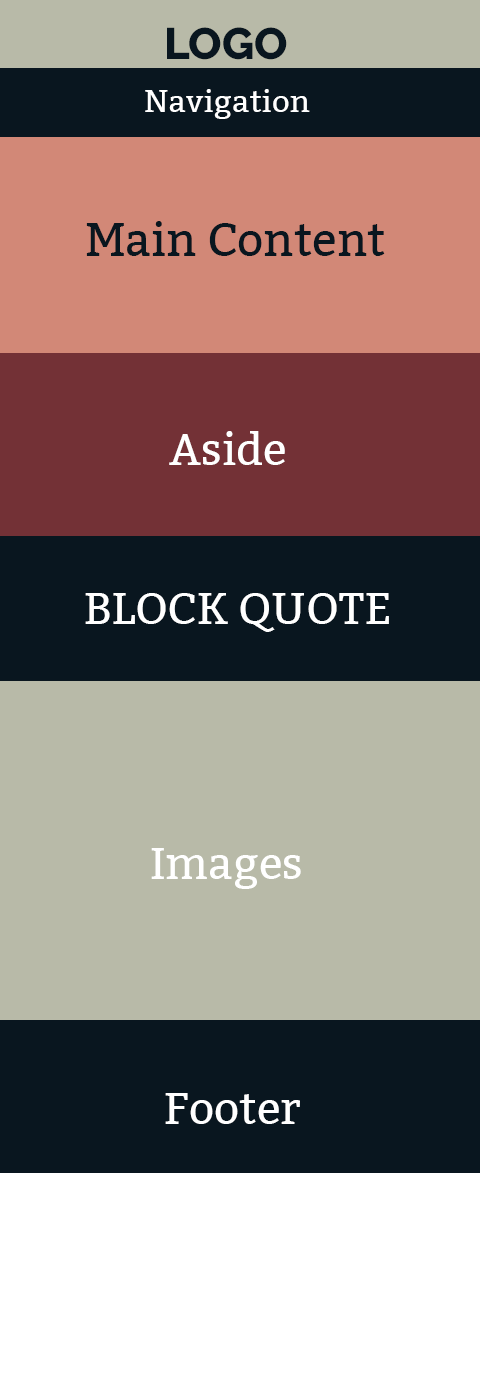
<style>
.page{position:relative;width:480px;height:1400px;background:#b8baa8}
.page>*{position:absolute;margin:0}
.t1{font:44px "Raleway-ExtraBold";color:#09161f}
.t2{font:31px "Bitter-Regular";color:#ffffff}
.t3{font:46px "Bitter-Regular";color:#09161f}
.t4{font:44px "Bitter-Regular";color:#ffffff}
</style>
<div class="page">
<p class="t1" style="left:167px;top:27px;width:120px;height:33px">LOGO</p>
<p class="t2" style="left:145px;top:89px;width:165px;height:30px">Navigation</p>
<p class="t3" style="left:86px;top:221px;width:299px;height:35px">Main Content</p>
<p class="t4" style="left:169px;top:431px;width:116px;height:34px">Aside</p>
<p class="t4" style="left:85px;top:593px;width:304px;height:39px">BLOCK QUOTE</p>
<p class="t4" style="left:151px;top:848px;width:150px;height:41px">Images</p>
<p class="t4" style="left:165px;top:1093px;width:135px;height:31px">Footer</p>
</div>
